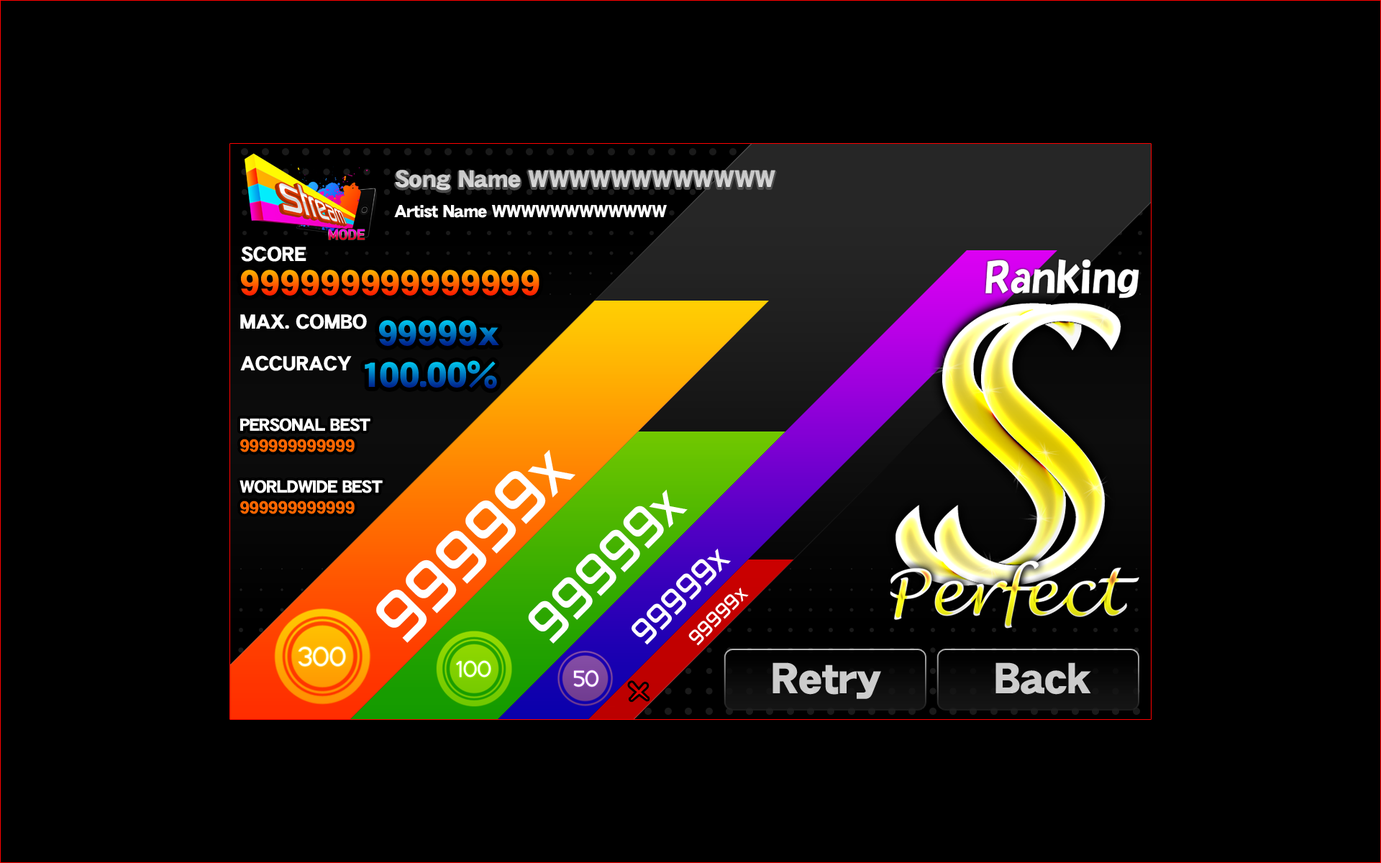
<style>
.page{position:relative;width:1381px;height:863px;background:#000000}
.page>*{position:absolute;margin:0}
.t1{font:23.7px "DFGothic-EB-WING-RKSJ-H";color:#cccccc}
.t2{font:17.3px "DFGothic-EB-WING-RKSJ-H";letter-spacing:-0.025em;color:#ffffff}
.t3{font:20.1px "DFGothic-EB-WING-RKSJ-H";color:#ffffff}
.t4{font:34.5px "DFGothic-EB-WING-RKSJ-H"}
.t5{font:17.3px "DFGothic-EB-WING-RKSJ-H";letter-spacing:-0.025em;color:#ff6600}
.t6{font:71.9px "DigitalEF-Medium";color:#ffffff}
.t7{font:57.6px "DigitalEF-Medium";color:#ffffff}
.t8{font:36px "DigitalEF-Medium";color:#ffffff}
.t9{font:21.6px "DigitalEF-Medium";color:#ffffff}
.t10{font:43.2px "DFGothic-EB-WING-RKSJ-H";color:#cccccc}
</style>
<div class="page">
<p class="t1" style="left:395px;top:170px;width:381px;height:21px">Song Name WWWWWWWWWWWW</p>
<p class="t2" style="left:394px;top:205px;width:273px;height:13px">Artist Name WWWWWWWWWWWW</p>
<p class="t3" style="left:241px;top:246px;width:65px;height:16px">SCORE</p>
<p class="t4" style="left:241px;top:270px;width:299px;height:26px">999999999999999</p>
<p class="t3" style="left:240px;top:314px;width:127px;height:15px">MAX. COMBO</p>
<p class="t4" style="left:379px;top:320px;width:120px;height:26px">99999x</p>
<p class="t3" style="left:240px;top:355px;width:112px;height:16px">ACCURACY</p>
<p class="t4" style="left:365px;top:360px;width:132px;height:29px">100.00%</p>
<p class="t2" style="left:240px;top:418px;width:143px;height:96px">PERSONAL BEST<br><span class="t5">999999999999<br><br></span>WORLDWIDE BEST<br><span class="t5">999999999999</span></p>
<p class="t6" style="left:376px;top:450px;width:200px;height:193px;rotate:-45deg">99999x</p>
<p class="t7" style="left:528px;top:489px;width:160px;height:155px;rotate:-45deg">99999x</p>
<p class="t8" style="left:632px;top:548px;width:99px;height:97px;rotate:-45deg">99999x</p>
<p class="t9" style="left:688px;top:588px;width:61px;height:58px;rotate:-45deg">99999x</p>
<p class="t10" style="left:773px;top:663px;width:108px;height:36px">Retry</p>
<p class="t10" style="left:996px;top:663px;width:95px;height:32px">Back</p>
</div>
